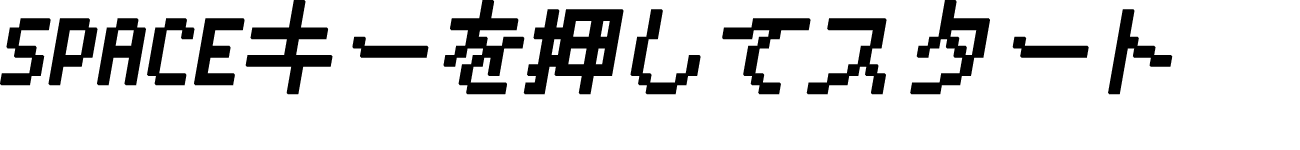
<style>
.page{position:relative;width:1300px;height:150px;background:#ffffff}
.page>*{position:absolute;margin:0}
.t1{font:91.7px "PixelMplus10-Regular";color:#000000;font-weight:bold;font-style:italic}
</style>
<div class="page">
<p class="t1" style="left:0px;top:0px;width:1173px;height:95px">SPACEキーを押してスタート</p>
</div>
